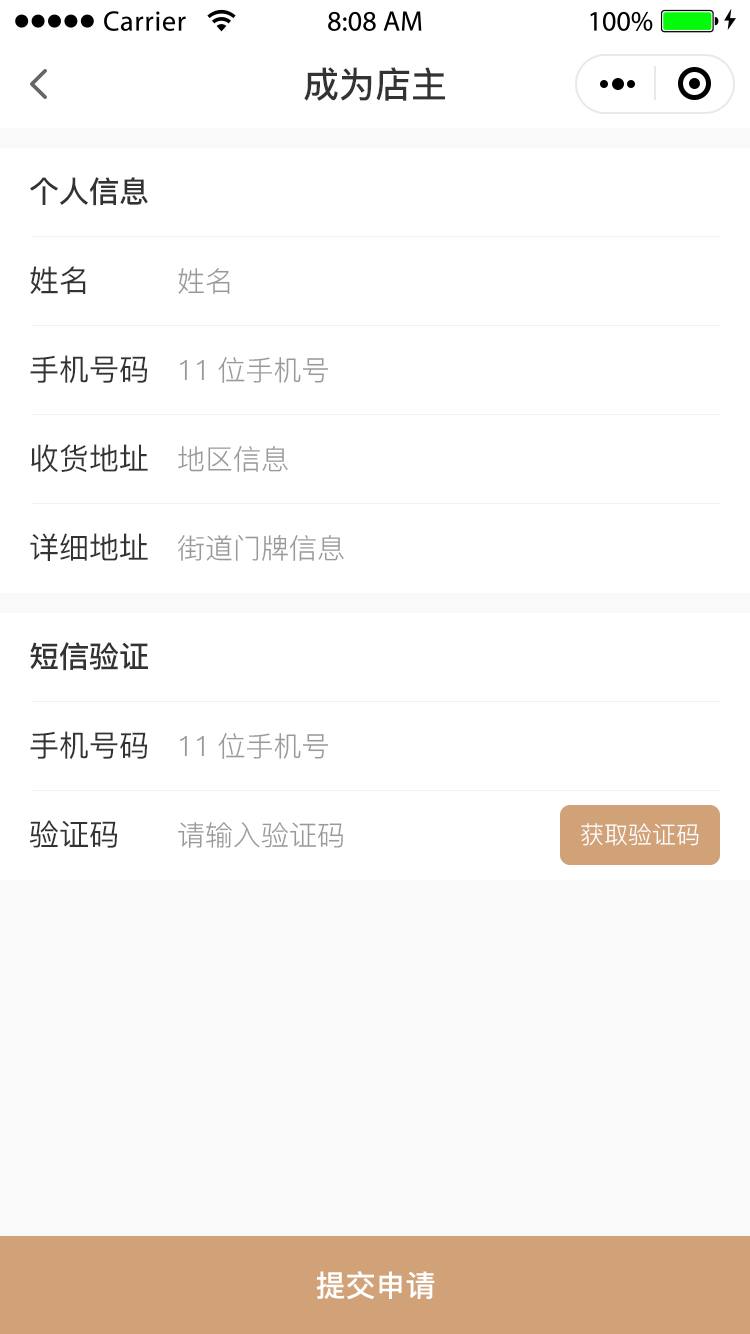
<style>
.page{position:relative;width:750px;height:1334px;background:#ffffff}
.page>*{position:absolute;margin:0}
.t1{font:36px "PingFang-SC-Bold";color:#333333}
.t2{font:30px "PingFang-SC-Bold";color:#333333}
.t3{font:30px "PingFang-SC-Medium";color:#333333}
.t4{font:28px "PingFang-SC-Regular";color:#999999}
.t5{font:24px "PingFang-SC-Regular";color:#ffffff}
.t6{font:30px "PingFang-SC-Bold";color:#ffffff}
</style>
<div class="page">
<p class="t1" style="left:304px;top:67px;width:141px;height:34px">成为店主</p>
<p class="t2" style="left:30px;top:177px;width:118px;height:29px">个人信息</p>
<p class="t3" style="left:30px;top:266px;width:56px;height:28px">姓名</p>
<p class="t4" style="left:178px;top:268px;width:52px;height:26px">姓名</p>
<p class="t3" style="left:30px;top:355px;width:117px;height:28px">手机号码</p>
<p class="t4" style="left:180px;top:357px;width:148px;height:26px">11位手机号</p>
<p class="t3" style="left:31px;top:444px;width:117px;height:28px">收货地址</p>
<p class="t4" style="left:178px;top:446px;width:110px;height:26px">地区信息</p>
<p class="t3" style="left:30px;top:533px;width:118px;height:28px">详细地址</p>
<p class="t4" style="left:178px;top:534px;width:166px;height:27px">街道门牌信息</p>
<p class="t2" style="left:30px;top:642px;width:118px;height:29px">短信验证</p>
<p class="t3" style="left:30px;top:731px;width:117px;height:28px">手机号码</p>
<p class="t4" style="left:180px;top:733px;width:148px;height:26px">11位手机号</p>
<p class="t3" style="left:30px;top:820px;width:87px;height:28px">验证码</p>
<p class="t4" style="left:178px;top:822px;width:165px;height:26px">请输入验证码</p>
<p class="t5" style="left:581px;top:823px;width:118px;height:23px">获取验证码</p>
<p class="t6" style="left:316px;top:1271px;width:119px;height:29px">提交申请</p>
</div>
